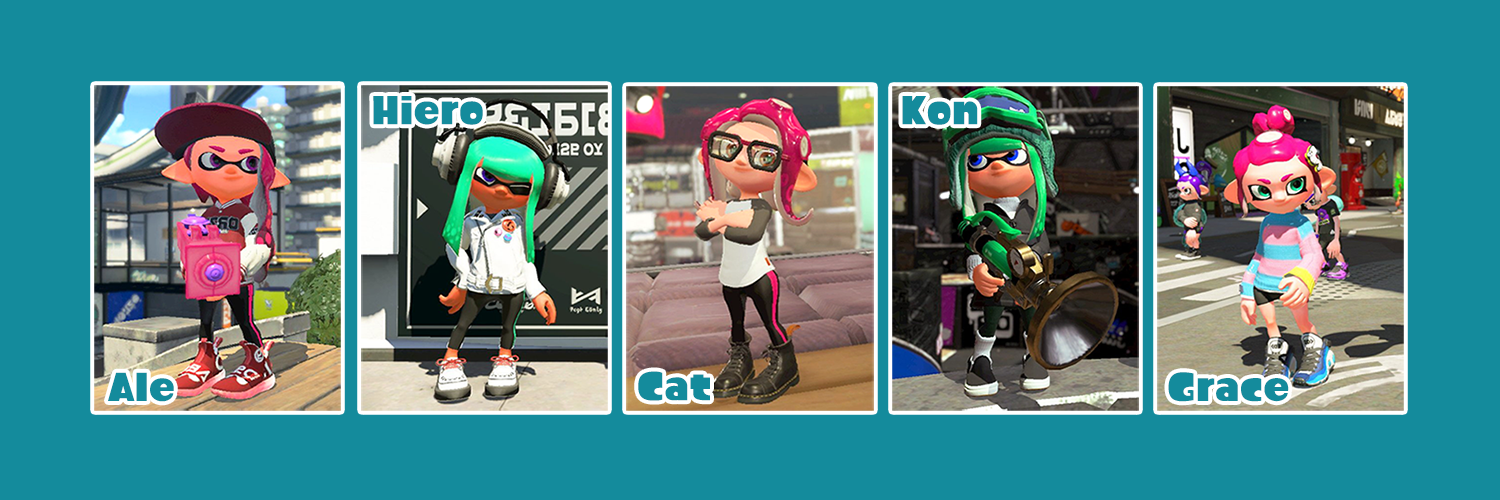
<style>
.page{position:relative;width:1500px;height:500px;background:#148b9c}
.page>*{position:absolute;margin:0}
.t1{font:43.1px "ProjectPaintball";color:#148b9c}
</style>
<div class="page">
<p class="t1" style="left:373px;top:96px;width:110px;height:29px">Hiero</p>
<p class="t1" style="left:902px;top:96px;width:76px;height:29px">Kon</p>
<p class="t1" style="left:108px;top:372px;width:66px;height:30px">Ale</p>
<p class="t1" style="left:638px;top:371px;width:72px;height:30px">Cat</p>
<p class="t1" style="left:1168px;top:372px;width:121px;height:30px">Grace</p>
</div>
